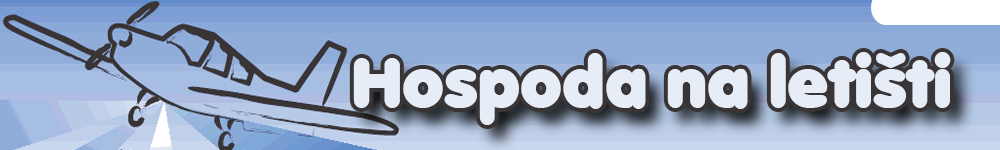
<style>
.page{position:relative;width:1000px;height:150px}
.page>*{position:absolute;margin:0}
.t1{font:69.8px "Valken";color:#ffffff;scale:0.95 1}
</style>
<div class="page">
<p class="t1" style="left:353px;top:52px;width:598px;height:73px">Hospoda na letišti</p>
</div>
